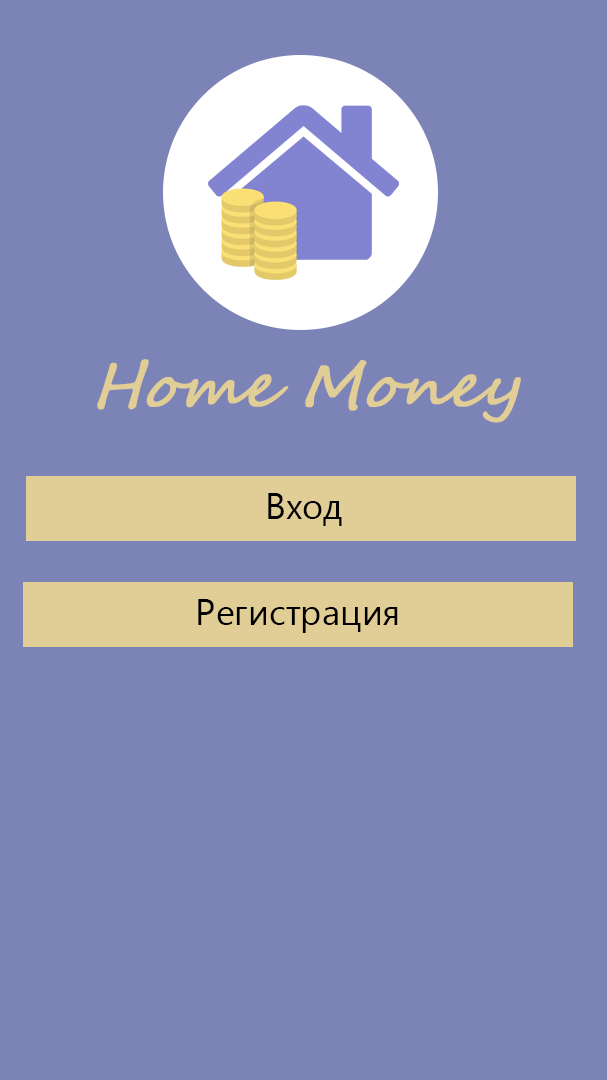
<style>
.page{position:relative;width:607px;height:1080px;background:#7c83b6}
.page>*{position:absolute;margin:0}
.t1{font:60px "SegoeScript";color:#e1cd96;font-weight:bold;font-style:italic}
.t2{font:36px "YuGothicUI-Regular";color:#020202}
.t3{font:36px "YuGothicUI-Regular";color:#000000}
</style>
<div class="page">
<p class="t1" style="left:97px;top:359px;width:424px;height:64px">Home Money</p>
<p class="t2" style="left:268px;top:493px;width:74px;height:33px">Вход</p>
<p class="t3" style="left:198px;top:599px;width:200px;height:34px">Регистрация</p>
</div>
